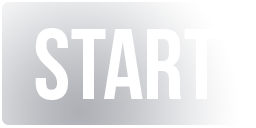
<style>
.page{position:relative;width:256px;height:128px;background:#ffffff}
.page>*{position:absolute;margin:0}
.t1{font:100px "BebasNeueBold";color:#ffffff}
</style>
<div class="page">
<p class="t1" style="left:35px;top:28px;width:184px;height:72px">start</p>
</div>
